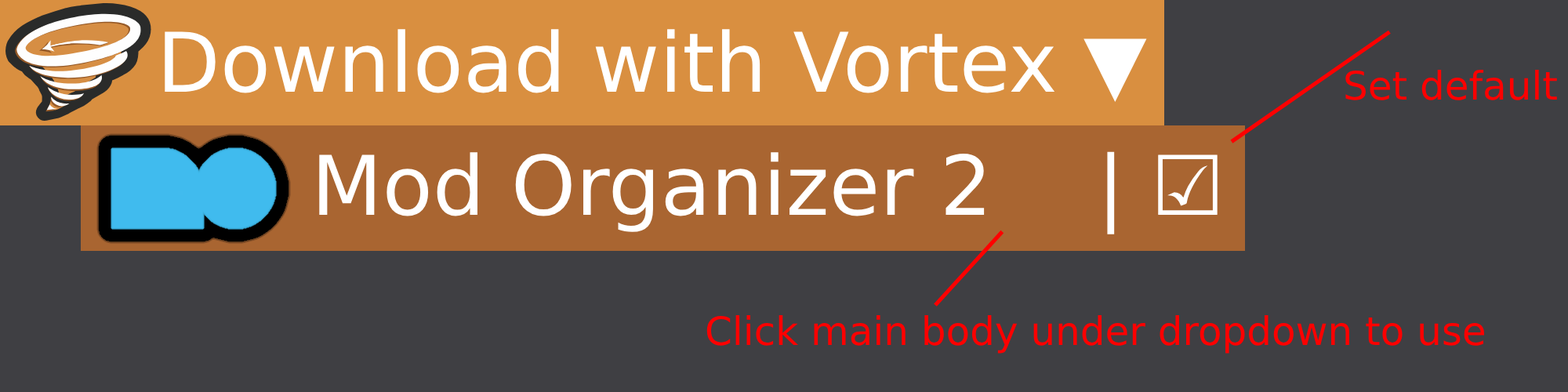
<style>
.page{position:relative;width:1568px;height:392px;background:#3f3f43}
.page>*{position:absolute;margin:0}
.t1{font:82.3px "DejaVuSans";color:#ffffff}
.t2{font:39.2px "DejaVuSans";color:#ff0000}
</style>
<div class="page">
<p class="t1" style="left:165px;top:29px;width:982px;height:73px">Download with Vortex ▼</p>
<p class="t2" style="left:1345px;top:70px;width:212px;height:30px">Set default</p>
<p class="t1" style="left:319px;top:151px;width:899px;height:83px">Mod Organizer 2    | ☑</p>
<p class="t2" style="left:706px;top:315px;width:778px;height:39px">Click main body under dropdown to use</p>
</div>
